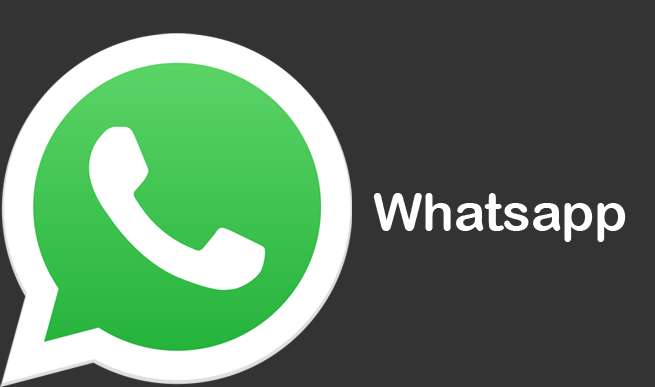
<style>
.page{position:relative;width:655px;height:387px;background:#333333}
.page>*{position:absolute;margin:0}
.t1{font:52.5px "ArialRoundedMTBold";color:#ffffff}
</style>
<div class="page">
<p class="t1" style="left:373px;top:193px;width:253px;height:49px">Whatsapp</p>
</div>
